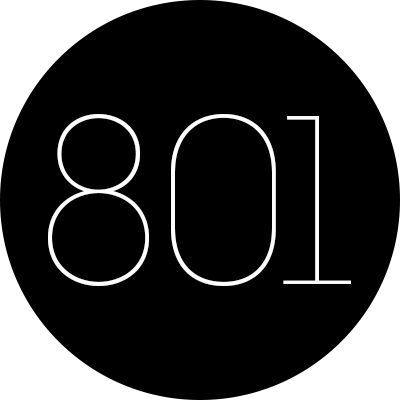
<style>
.page{position:relative;width:400px;height:400px;background:#000000}
.page>*{position:absolute;margin:0}
.t1{font:240.4px "IntroCondensed-Thin";color:#ffffff}
</style>
<div class="page">
<p class="t1" style="left:48px;top:114px;width:303px;height:172px">801</p>
</div>
